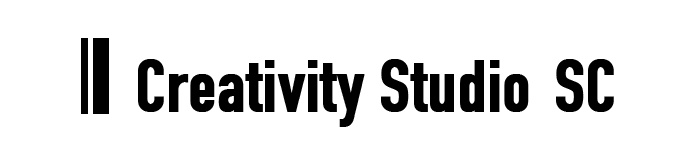
<style>
.page{position:relative;width:700px;height:150px;background:#ffffff}
.page>*{position:absolute;margin:0}
.t1{font:72px "DINCondensed-Bold";color:#000000;font-weight:bold}
</style>
<div class="page">
<p class="t1" style="left:138px;top:59px;width:476px;height:68px">Creativity Studio  SC</p>
</div>
